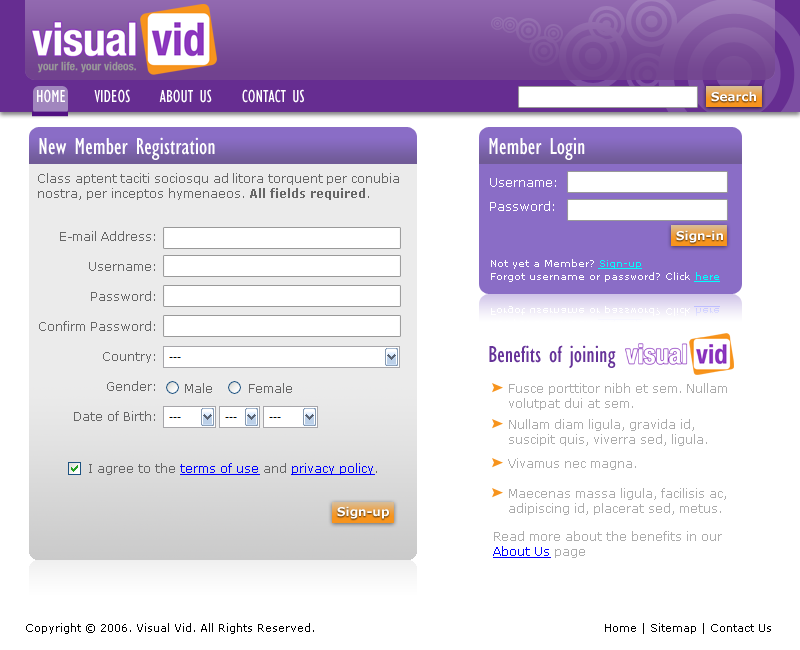
<style>
.page{position:relative;width:800px;height:650px;background:#ffffff}
.page>*{position:absolute;margin:0}
.t1{font:18px "GillSansMT-Condensed";color:#ffffff}
.t2{font:12px "Verdana-Bold";color:#ffffff}
.t3{font:24px "GillSansMT-Condensed";color:#ffffff}
.t4{font:12px "Verdana";color:#666666}
.t5{font:12px "Verdana-Bold";color:#666666}
.t6{font:12px/24px "Verdana";color:#ffffff}
.t7{font:12px/30px "Verdana";color:#666666}
.t8{font:10px "Verdana";color:#ffffff}
.t9{font:10px "Verdana";color:#00ffff;text-decoration:underline}
.t10{font:24px "GillSansMT-Condensed";color:#663399}
.t11{font:12px "Verdana";color:#acacac}
.t12{font:12px "Verdana";color:#0000ff;text-decoration:underline}
.t13{font:11px "Verdana";color:#000000}
</style>
<div class="page">
<p class="t1" style="left:37px;top:89px;width:267px;height:14px">HOME     VIDEOS     ABOUT US     CONTACT US</p>
<p class="t2" style="left:711px;top:91px;width:45px;height:11px">Search</p>
<p class="t3" style="left:39px;top:137px;width:176px;height:23px">New Member Registration</p>
<p class="t3" style="left:489px;top:137px;width:96px;height:23px">Member Login</p>
<p class="t4" style="left:38px;top:173px;width:361px;height:27px;text-align:justify">Class aptent taciti sociosqu ad litora torquent per conubia nostra, per inceptos hymenaeos. <span class="t5">All fields required</span>.</p>
<p class="t6" style="left:490px;top:178px;width:66px;height:33px;text-align:justify">Username:<br>Password:</p>
<p class="t7" style="left:39px;top:231px;width:116px;height:190px;text-align:right">E-mail Address:<br>Username:<br>Password:<br>Confirm Password:<br>Country:<br>Gender:<br>Date of Birth:</p>
<p class="t2" style="left:676px;top:230px;width:47px;height:13px">Sign-in</p>
<p class="t8" style="left:491px;top:259px;width:151px;height:10px">Not yet a Member? <span class="t9">Sign-up</span></p>
<p class="t8" style="left:491px;top:272px;width:229px;height:10px">Forgot username or password? Click <span class="t9">here</span></p>
<p class="t10" style="left:489px;top:345px;width:127px;height:23px">Benefits of joining</p>
<p class="t4" style="left:185px;top:383px;width:27px;height:10px">Male</p>
<p class="t4" style="left:249px;top:383px;width:43px;height:10px">Female</p>
<p class="t11" style="left:509px;top:383px;width:218px;height:27px">Fusce porttitor nibh et sem. Nullam volutpat dui at sem.</p>
<p class="t11" style="left:509px;top:419px;width:198px;height:27px">Nullam diam ligula, gravida id, suscipit quis, viverra sed, ligula.</p>
<p class="t11" style="left:508px;top:458px;width:128px;height:12px">Vivamus nec magna.</p>
<p class="t4" style="left:89px;top:463px;width:288px;height:12px">I agree to the <span class="t12">terms of use</span> and <span class="t12">privacy policy</span>.</p>
<p class="t11" style="left:509px;top:488px;width:217px;height:27px">Maecenas massa ligula, facilisis ac, adipiscing id, placerat sed, metus.</p>
<p class="t2" style="left:337px;top:506px;width:52px;height:13px">Sign-up</p>
<p class="t11" style="left:493px;top:531px;width:229px;height:27px">Read more about the benefits in our <br><span class="t12">About Us</span> page</p>
<p class="t13" style="left:26px;top:623px;width:288px;height:11px">Copyright © 2006. Visual Vid. All Rights Reserved.</p>
<p class="t13" style="left:605px;top:623px;width:166px;height:11px">Home | Sitemap | Contact Us</p>
</div>
